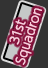
<style>
.page{position:relative;width:48px;height:68px;background:#333333}
.page>*{position:absolute;margin:0}
.t1{font:12px/12px "UDShinGoPro-Light";color:#fbcedf;font-weight:bold}
</style>
<div class="page">
<p class="t1" style="left:9px;top:8px;width:33px;height:57px;text-align:center;rotate:-72deg">31st<br>Squadron</p>
</div>
